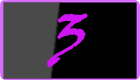
<style>
.page{position:relative;width:140px;height:80px;background:#000000}
.page>*{position:absolute;margin:0}
.t1{font:74.2px "VinerHandITC";color:#d015f2}
</style>
<div class="page">
<p class="t1" style="left:47px;top:13px;width:41px;height:55px">3</p>
</div>
